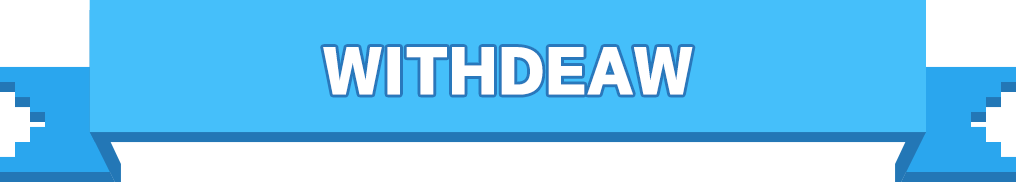
<style>
.page{position:relative;width:1016px;height:182px;background:#45bffa}
.page>*{position:absolute;margin:0}
.t1{font:59.6px "FZCCHJW--GB1-0";color:#ffffff}
</style>
<div class="page">
<p class="t1" style="left:323px;top:47px;width:370px;height:48px">WITHDEAW</p>
</div>
